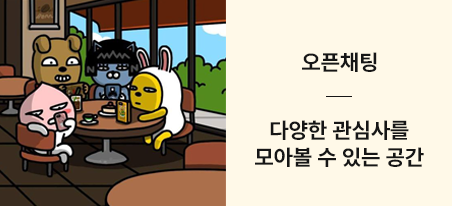
<style>
.page{position:relative;width:452px;height:206px;background:#fff9e8}
.page>*{position:absolute;margin:0}
.t1{font:22px "Pretendard-Bold";letter-spacing:0.01em;color:#161616}
</style>
<div class="page">
<p class="t1" style="left:302px;top:52px;width:75px;height:20px">오픈채팅</p>
<p class="t1" style="left:255px;top:120px;width:169px;height:47px;text-align:center">다양한 관심사를<br>모아볼 수 있는 공간</p>
</div>
